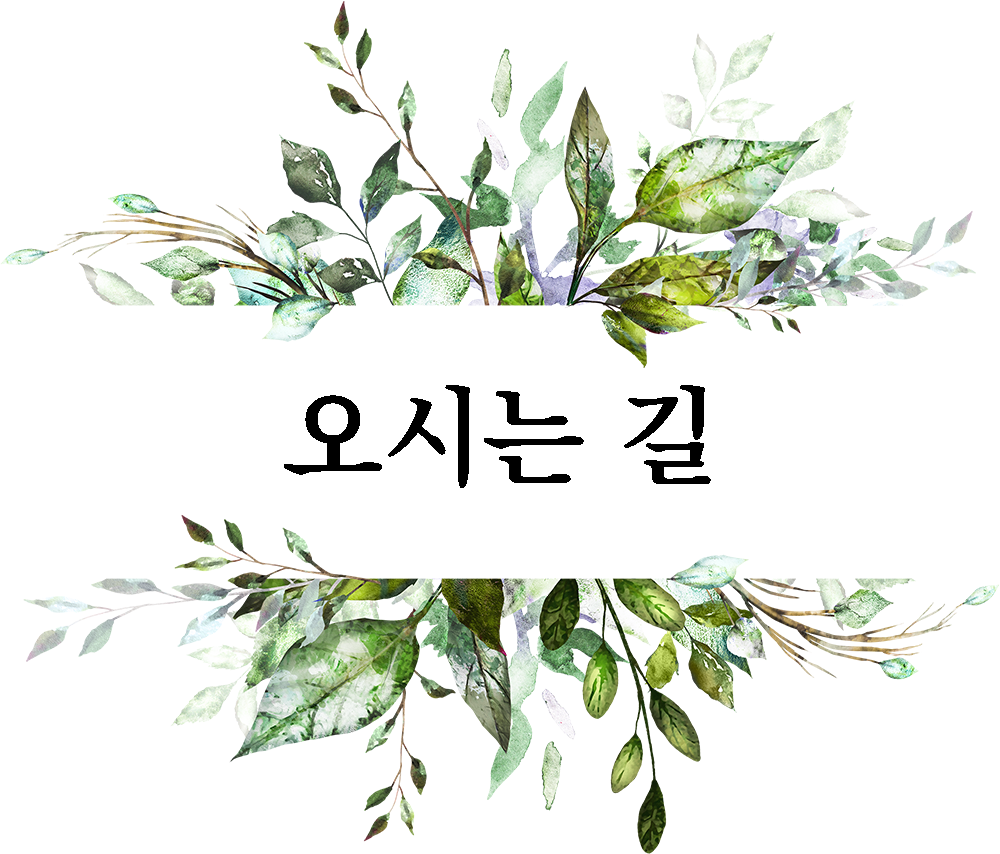
<style>
.page{position:relative;width:1000px;height:854px;background:#ffffff}
.page>*{position:absolute;margin:0}
.t1{font:107.6px "KoPubWorldBatangBold";color:#000000}
</style>
<div class="page">
<p class="t1" style="left:284px;top:385px;width:427px;height:103px">오시는 길</p>
</div>
